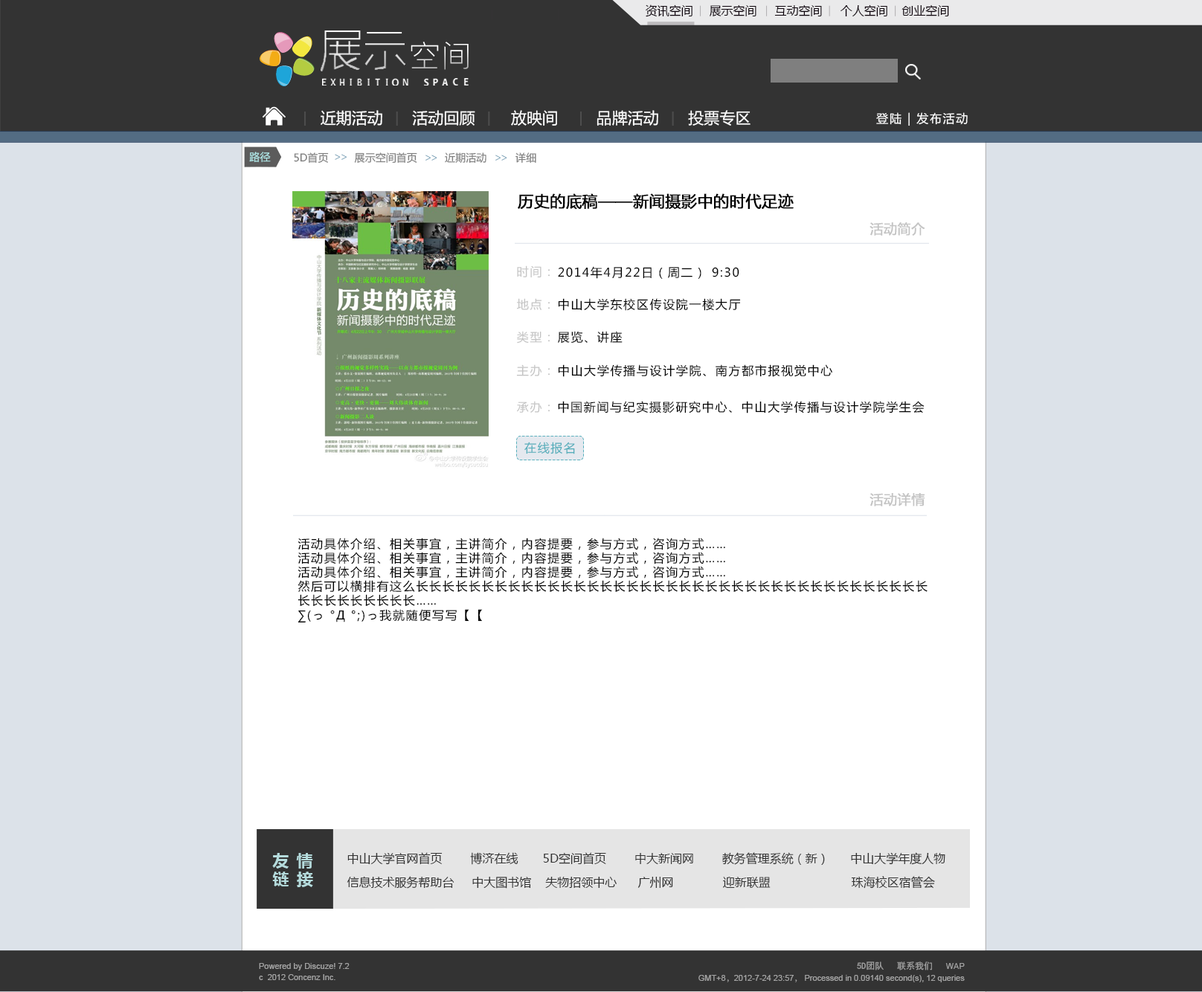
<style>
.page{position:relative;width:1202px;height:992px;background:#ffffff}
.page>*{position:absolute;margin:0}
.t1{font:11.9px "MicrosoftYaHei";color:#0c020b}
.t2{font:15.6px "MicrosoftYaHei";color:#ffffff}
.t3{font:11.9px "MicrosoftYaHei";letter-spacing:0.1em;color:#ffffff}
.t4{font:10.4px "MicrosoftYaHei";color:#b1e8e8}
.t5{font:10.4px "MicrosoftYaHei";color:#808080}
.t6{font:10.4px "MyriadPro-Regular";color:#7fa5ba}
.t7{font:15.6px "MicrosoftYaHei";color:#000000;font-weight:bold}
.t8{font:13.4px "MicrosoftYaHei";color:#c4c4c4;font-weight:bold}
.t9{font:11.9px "MicrosoftYaHei";letter-spacing:0.1em;color:#c4c4c4}
.t10{font:11.9px "MicrosoftYaHei";letter-spacing:0.1em;color:#000000}
.t11{font:11.9px "MicrosoftYaHei";letter-spacing:0.1em;color:#52adba}
.t12{font:15.6px "MicrosoftYaHei-Bold";letter-spacing:0.1em;color:#b5dbdc}
.t13{font:11.9px/23.8px "MicrosoftYaHei";color:#333333}
.t14{font:8.2px "ArialMT";color:#a3a3a3}
.t15{font:8.9px "SimHei";color:#a3a3a3}
.t16{font:8.2px "AdobeSongStd-Light";color:#a3a3a3}
</style>
<div class="page">
<p class="t1" style="left:646px;top:4px;width:46px;height:13px">资讯空间</p>
<p class="t1" style="left:710px;top:4px;width:46px;height:12px">展示空间</p>
<p class="t1" style="left:774px;top:4px;width:48px;height:12px">互动空间</p>
<p class="t1" style="left:840px;top:4px;width:47px;height:12px">个人空间</p>
<p class="t1" style="left:901px;top:4px;width:48px;height:12px">创业空间</p>
<p class="t2" style="left:321px;top:110px;width:61px;height:16px">近期活动</p>
<p class="t2" style="left:412px;top:110px;width:63px;height:16px">活动回顾</p>
<p class="t2" style="left:511px;top:110px;width:46px;height:16px">放映间</p>
<p class="t2" style="left:596px;top:110px;width:62px;height:16px">品牌活动</p>
<p class="t2" style="left:688px;top:110px;width:62px;height:16px">投票专区</p>
<p class="t3" style="left:876px;top:112px;width:92px;height:14px">登陆 | 发布活动</p>
<p class="t4" style="left:249px;top:152px;width:22px;height:10px">路径</p>
<p class="t5" style="left:294px;top:152px;width:35px;height:11px">5D首页</p>
<p class="t6" style="left:335px;top:154px;width:12px;height:6px">&gt;&gt;</p>
<p class="t5" style="left:354px;top:152px;width:63px;height:11px">展示空间首页</p>
<p class="t6" style="left:425px;top:155px;width:12px;height:6px">&gt;&gt;</p>
<p class="t5" style="left:445px;top:152px;width:41px;height:11px">近期活动</p>
<p class="t6" style="left:495px;top:155px;width:12px;height:6px">&gt;&gt;</p>
<p class="t5" style="left:515px;top:152px;width:21px;height:11px">详细</p>
<p class="t7" style="left:518px;top:193px;width:276px;height:17px">历史的底稿——新闻摄影中的时代足迹</p>
<p class="t8" style="left:869px;top:222px;width:56px;height:14px">活动简介</p>
<p class="t9" style="left:517px;top:266px;width:33px;height:12px">时间：</p>
<p class="t10" style="left:558px;top:266px;width:181px;height:13px">2014年4月22日（周二） 9:30</p>
<p class="t9" style="left:517px;top:298px;width:33px;height:12px">地点：</p>
<p class="t10" style="left:558px;top:298px;width:183px;height:13px">中山大学东校区传设院一楼大厅</p>
<p class="t9" style="left:517px;top:331px;width:33px;height:13px">类型：</p>
<p class="t10" style="left:558px;top:331px;width:65px;height:13px">展览、讲座</p>
<p class="t9" style="left:516px;top:364px;width:34px;height:12px">主办：</p>
<p class="t10" style="left:558px;top:364px;width:274px;height:13px">中山大学传播与设计学院、南方都市报视觉中心</p>
<p class="t9" style="left:517px;top:401px;width:33px;height:12px">承办：</p>
<p class="t10" style="left:558px;top:401px;width:366px;height:13px">中国新闻与纪实摄影研究中心、中山大学传播与设计学院学生会</p>
<p class="t11" style="left:524px;top:442px;width:51px;height:12px">在线报名</p>
<p class="t8" style="left:869px;top:493px;width:56px;height:13px">活动详情</p>
<p class="t10" style="left:297px;top:538px;width:630px;height:85px">活动具体介绍、相关事宜，主讲简介，内容提要，参与方式，咨询方式……<br>活动具体介绍、相关事宜，主讲简介，内容提要，参与方式，咨询方式……<br>活动具体介绍、相关事宜，主讲简介，内容提要，参与方式，咨询方式……<br>然后可以横排有这么长长长长长长长长长长长长长长长长长长长长长长长长长长长长长长长长长长长长长长长长长长长长长长长长……<br>∑(っ °Д °;)っ我就随便写写【【</p>
<p class="t12" style="left:272px;top:853px;width:41px;height:34px">友 情 <br>链 接</p>
<p class="t13" style="left:347px;top:852px;width:598px;height:37px">中山大学官网首页        博济在线       5D空间首页        中大新闻网        教务管理系统（新）      中山大学年度人物 <br>信息技术服务帮助台     中大图书馆    失物招领中心      广州网              迎新联盟                       珠海校区宿管会</p>
<p class="t14" style="left:259px;top:963px;width:91px;height:8px">Powered by Discuze! 7.2</p>
<p class="t15" style="left:857px;top:962px;width:27px;height:9px">5D团队</p>
<p class="t15" style="left:897px;top:962px;width:35px;height:9px">联系我们</p>
<p class="t14" style="left:945px;top:963px;width:20px;height:6px">WAP</p>
<p class="t14" style="left:259px;top:974px;width:76px;height:6px">c  2012 Concenz Inc.</p>
<p class="t14" style="left:698px;top:975px;width:267px;height:7px">GMT+8<span class="t16">，</span>2012-7-24 23:57<span class="t16">，</span> Processed in 0.09140 second(s), 12 queries</p>
</div>
